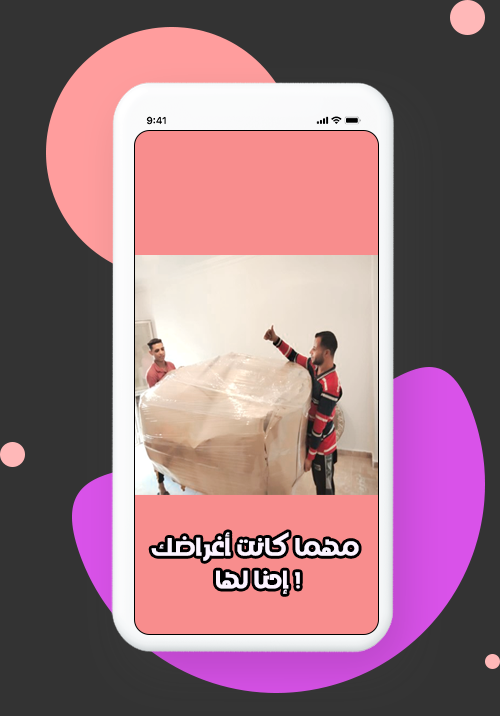
<style>
.page{position:relative;width:500px;height:716px;background:#333333}
.page>*{position:absolute;margin:0}
.t1{font:27.4px "VEXA";color:#fcf3ff}
</style>
<div class="page">
<p class="t1" style="left:151px;top:532px;width:208px;height:62px;text-align:center">مهما كانت أغراضك <br>إحنا لها !</p>
</div>
